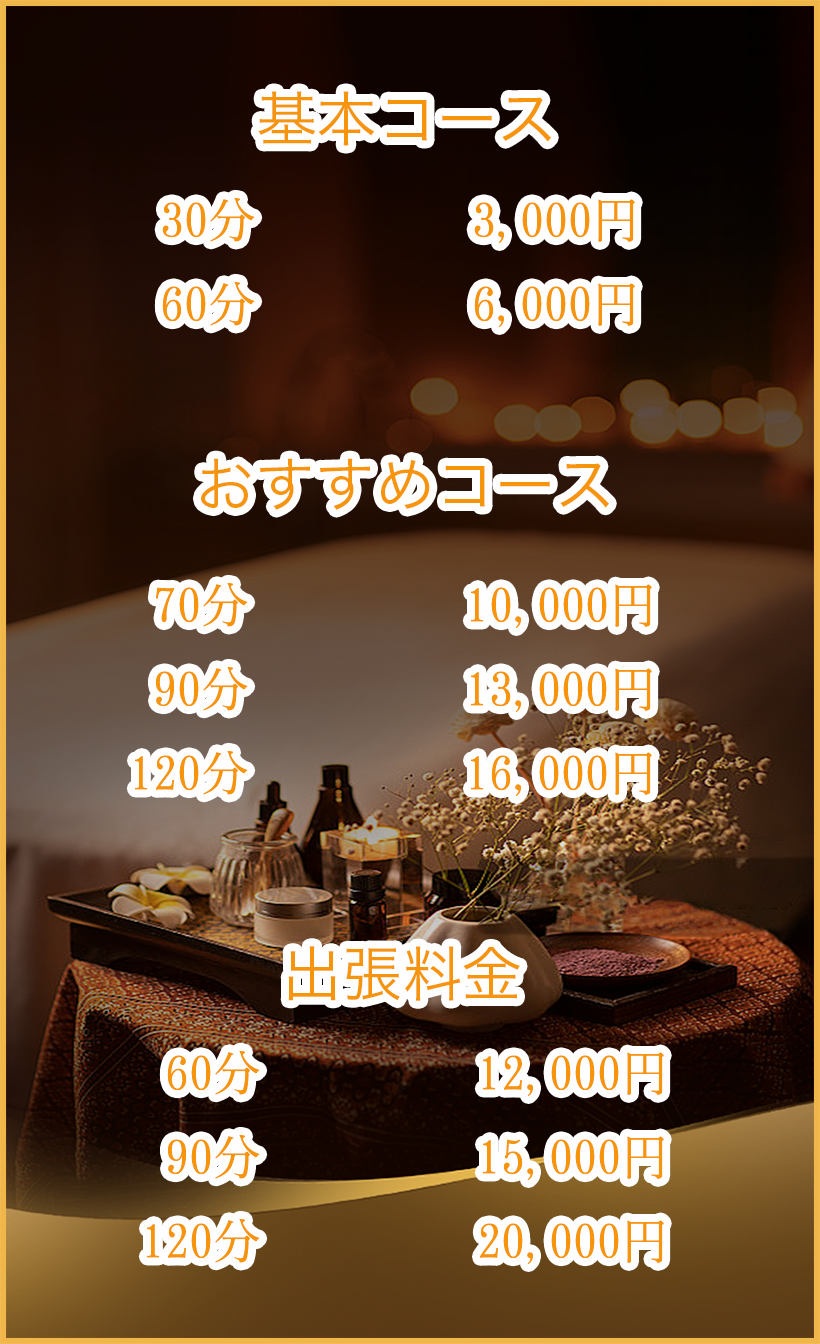
<style>
.page{position:relative;width:820px;height:1344px}
.page>*{position:absolute;margin:0}
.t1{font:60px "HiraKakuPro-W3";color:#f6950b}
.t2{font:48px "SimSong-Regular";color:#f6950b}
</style>
<div class="page">
<p class="t1" style="left:258px;top:91px;width:293px;height:55px">基本コース</p>
<p class="t2" style="left:162px;top:197px;width:473px;height:130px">30分         3,000円<br>60分         6,000円</p>
<p class="t1" style="left:201px;top:458px;width:408px;height:52px">おすすめコース</p>
<p class="t2" style="left:134px;top:582px;width:518px;height:214px">70分         10,000円<br> 90分         13,000円<br>120分         16,000円</p>
<p class="t1" style="left:288px;top:946px;width:232px;height:55px">出張料金</p>
</div>
